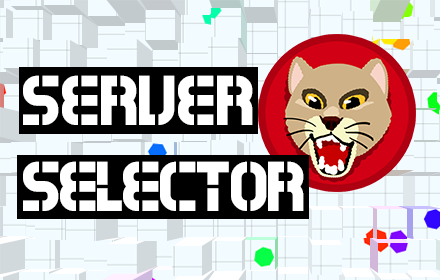
<style>
.page{position:relative;width:440px;height:280px;background:#f2fbff}
.page>*{position:absolute;margin:0}
.t1{font:72px "Exostencil";letter-spacing:-0.025em;color:#ffffff}
.t2{font:72px "Exostencil";color:#ffffff}
</style>
<div class="page">
<p class="t1" style="left:23px;top:75px;width:281px;height:136px"><span class="t2">SERVER<br></span>selector</p>
</div>
